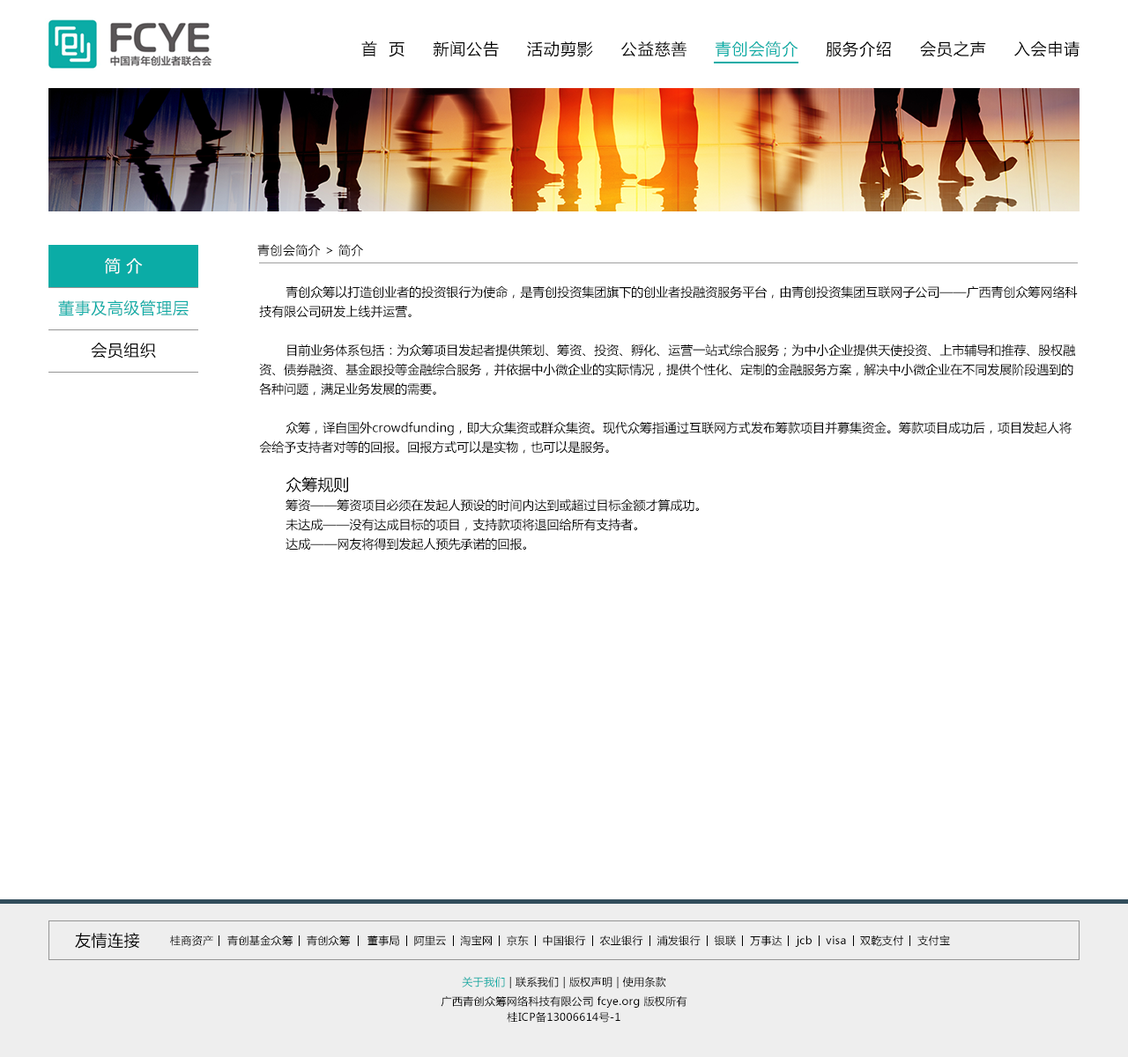
<style>
.page{position:relative;width:1128px;height:1057px;background:#ffffff}
.page>*{position:absolute;margin:0}
.t1{font:15.9px "MicrosoftYaHei";letter-spacing:0.05em;color:#000000}
.t2{font:15.9px "MicrosoftYaHei";letter-spacing:0.05em;color:#08ada6}
.t3{font:12.3px "MicrosoftYaHei";letter-spacing:0.03em;color:#000000}
.t4{font:15.9px/42.3px "MicrosoftYaHei";letter-spacing:0.03em;color:#0baca6}
.t5{font:15.9px/42.3px "MicrosoftYaHei";letter-spacing:0.03em;color:#ffffff}
.t6{font:15.9px/42.3px "MicrosoftYaHei";letter-spacing:0.03em;color:#000000}
.t7{font:12.3px/19.4px "MicrosoftYaHei";color:#000000}
.t8{font:15.9px/19.4px "MicrosoftYaHei";color:#000000}
.t9{font:15.9px "MicrosoftYaHei";letter-spacing:0.03em;color:#000000}
.t10{font:10.6px "MicrosoftYaHei";letter-spacing:0.03em;color:#000000}
.t11{font:10.6px "MicrosoftYaHei";letter-spacing:0.03em}
.t12{font:10.6px/15.9px "MicrosoftYaHei";letter-spacing:0.03em;color:#000000}
</style>
<div class="page">
<p class="t1" style="left:361px;top:41px;width:718px;height:16px">首  页     新闻公告     活动剪影     公益慈善     <span class="t2">青创会简介</span>     服务介绍     会员之声     入会申请</p>
<p class="t3" style="left:257px;top:244px;width:106px;height:12px">青创会简介 &gt; 简介</p>
<p class="t4" style="left:58px;top:258px;width:131px;height:101px;text-align:center"><span class="t5">简 介<br></span>董事及高级管理层<br><span class="t6">会员组织</span></p>
<p class="t7" style="left:259px;top:285px;width:819px;height:266px">青创众筹以打造创业者的投资银行为使命，是青创投资集团旗下的创业者投融资服务平台，由青创投资集团互联网子公司——广西青创众筹网络科技有限公司研发上线并运营。<br><br>目前业务体系包括：为众筹项目发起者提供策划、筹资、投资、孵化、运营一站式综合服务；为中小企业提供天使投资、上市辅导和推荐、股权融资、债券融资、基金跟投等金融综合服务，并依据中小微企业的实际情况，提供个性化、定制的金融服务方案，解决中小微企业在不同发展阶段遇到的各种问题，满足业务发展的需要。<br> <br>众筹，译自国外crowdfunding，即大众集资或群众集资。现代众筹指通过互联网方式发布筹款项目并募集资金。筹款项目成功后，项目发起人将会给予支持者对等的回报。回报方式可以是实物，也可以是服务。<br> <br><span class="t8">众筹规则<br></span>筹资——筹资项目必须在发起人预设的时间内达到或超过目标金额才算成功。<br>未达成——没有达成目标的项目，支持款项将退回给所有支持者。<br>达成——网友将得到发起人预先承诺的回报。</p>
<p class="t9" style="left:75px;top:932px;width:64px;height:17px">友情连接</p>
<p class="t10" style="left:170px;top:935px;width:780px;height:12px">桂商资产    青创基金众筹    青创众筹     董事局    阿里云    淘宝网    京东    中国银行    农业银行    浦发银行    银联    万事达    jcb    visa    双乾支付    支付宝</p>
<p class="t11" style="left:462px;top:977px;width:204px;height:12px">关于我们 | 联系我们 | 版权声明 | 使用条款</p>
<p class="t12" style="left:441px;top:997px;width:246px;height:26px;text-align:center">广西青创众筹网络科技有限公司 fcye.org 版权所有<br>桂ICP备13006614号-1</p>
</div>
